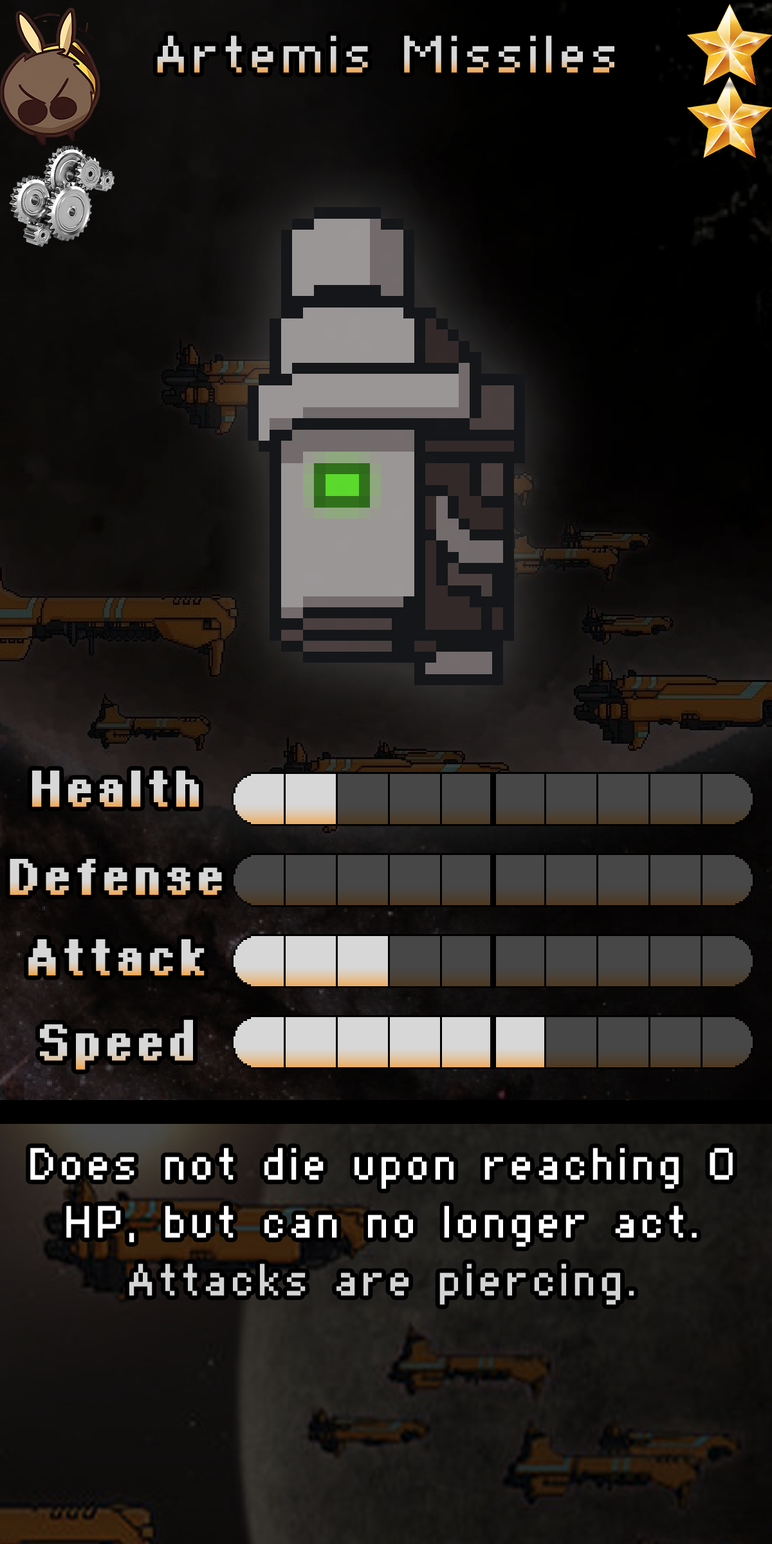
<style>
.page{position:relative;width:772px;height:1544px}
.page>*{position:absolute;margin:0}
.t1{font:90.1px "Supertext01"}
.t2{font:77.2px "Supertext02Bold"}
.t3{font:77.2px "Supertext02Bold";color:#d7d7d7}
.t4{font:77.2px/57.9px "Supertext01";color:#ffffff}
.t5{font:77.2px/57.9px "Supertext01";color:#d4d4d4}
</style>
<div class="page">
<p class="t1" style="left:157px;top:35px;width:458px;height:38px">Artemis Missiles</p>
<p class="t2" style="left:32px;top:770px;width:167px;height:37px">Health</p>
<p class="t2" style="left:10px;top:859px;width:212px;height:36px">Defense</p>
<p class="t2" style="left:28px;top:939px;width:177px;height:37px">Attack</p>
<p class="t3" style="left:40px;top:1020px;width:153px;height:50px">Speed</p>
<p class="t4" style="left:30px;top:1148px;width:703px;height:157px;text-align:center">Does not die upon reaching 0 HP, but can no longer act.<br><span class="t5">Attacks are piercing.</span></p>
</div>
